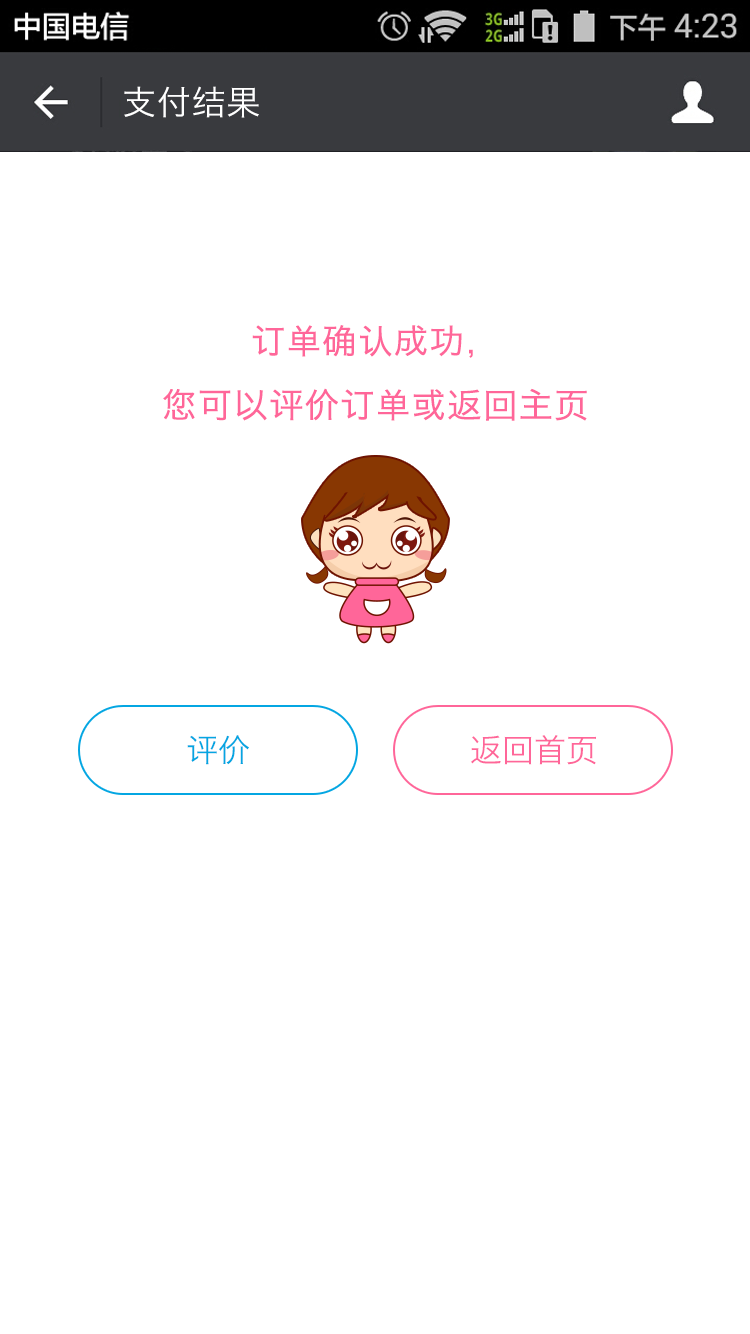
<style>
.page{position:relative;width:750px;height:1334px;background:#ffffff}
.page>*{position:absolute;margin:0}
.t1{font:34px "HiraginoSansGB-W3";letter-spacing:0.022em;color:#ffffff}
.t2{font:34px/30px "HiraginoSansGB-W3";letter-spacing:0.022em;color:#ff6699;font-weight:bold}
.t3{font:32px "HiraginoSansGB-W3";color:#04a6e2}
.t4{font:32px "HiraginoSansGB-W3";color:#ff6699}
</style>
<div class="page">
<p class="t1" style="left:124px;top:86px;width:135px;height:32px">支付结果</p>
<p class="t2" style="left:163px;top:325px;width:424px;height:96px;text-align:center">订单确认成功，<br><br>您可以评价订单或返回主页</p>
<p class="t3" style="left:187px;top:735px;width:62px;height:30px">评价</p>
<p class="t4" style="left:471px;top:735px;width:125px;height:30px">返回首页</p>
</div>
